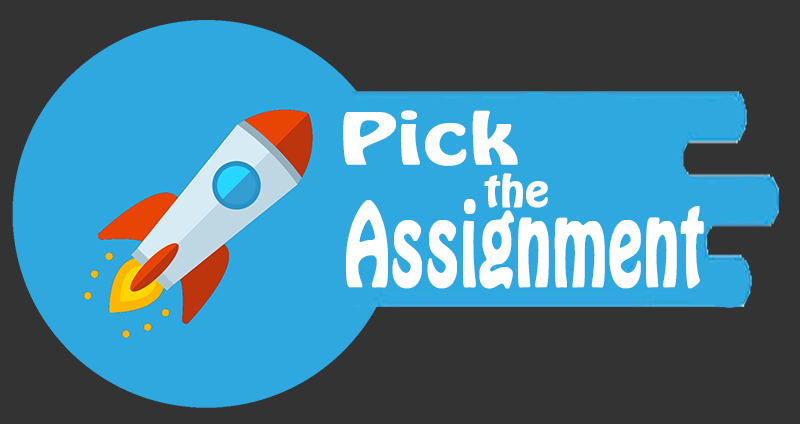
<style>
.page{position:relative;width:800px;height:424px;background:#333333}
.page>*{position:absolute;margin:0}
.t1{font:62.6px "HoboStd";color:#ffffff;font-weight:bold;scale:1.42 1}
.t2{font:39px "HoboStd";color:#ffffff;font-weight:bold;scale:1.11 1}
.t3{font:101.9px "HoboStd";color:#ffffff;font-weight:bold;scale:0.62 1}
</style>
<div class="page">
<p class="t1" style="left:343px;top:110px;width:175px;height:56px">Pick</p>
<p class="t2" style="left:484px;top:173px;width:64px;height:35px">the</p>
<p class="t3" style="left:346px;top:199px;width:358px;height:90px">Assignment</p>
</div>
